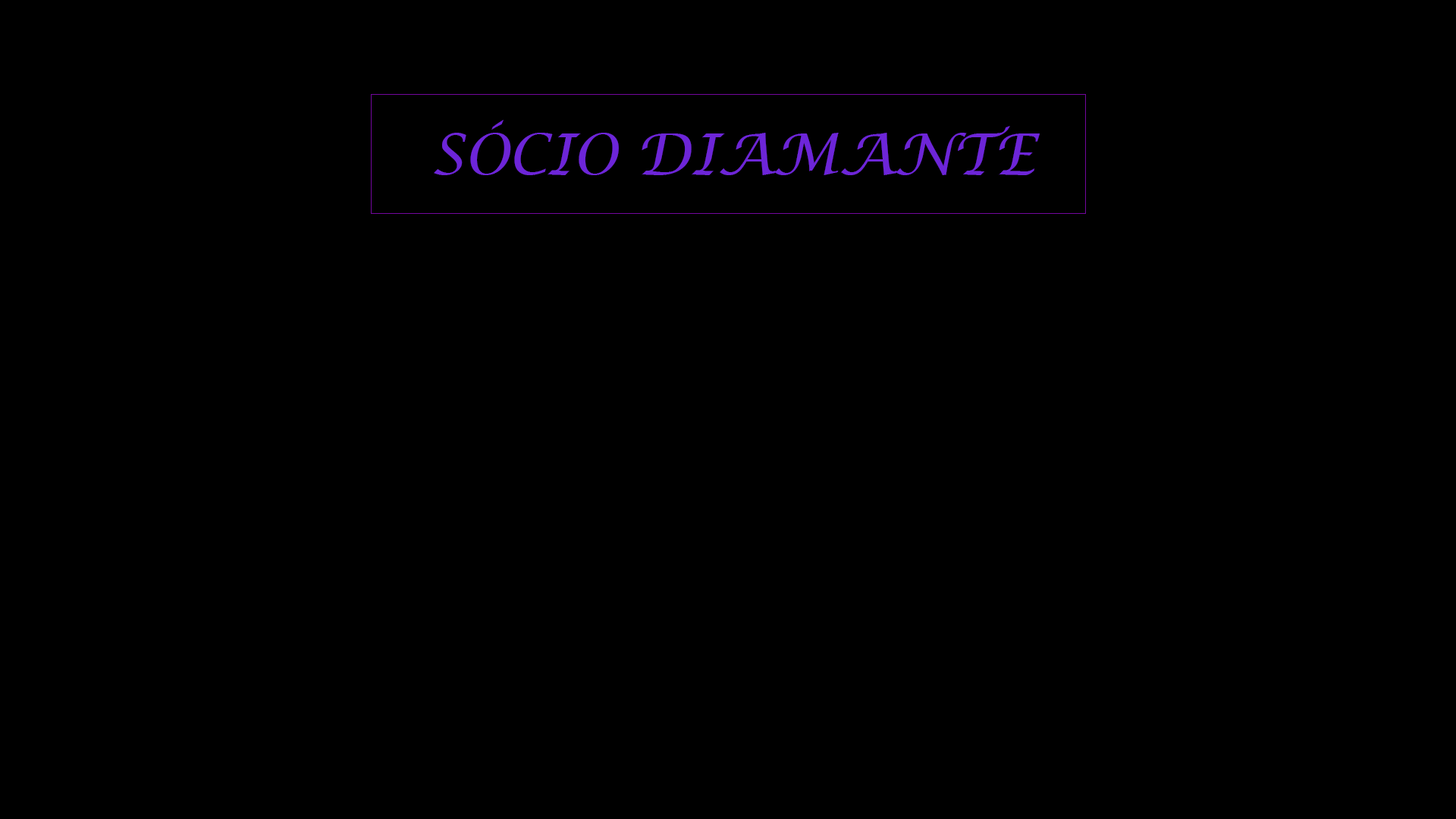
<style>
.page{position:relative;width:1456px;height:819px;background:#000000}
.page>*{position:absolute;margin:0}
.t1{font:56.9px "LucidaCalligraphy-Italic";color:#6d25d8}
</style>
<div class="page">
<p class="t1" style="left:434px;top:120px;width:606px;height:55px">SÓCIO DIAMANTE</p>
</div>
